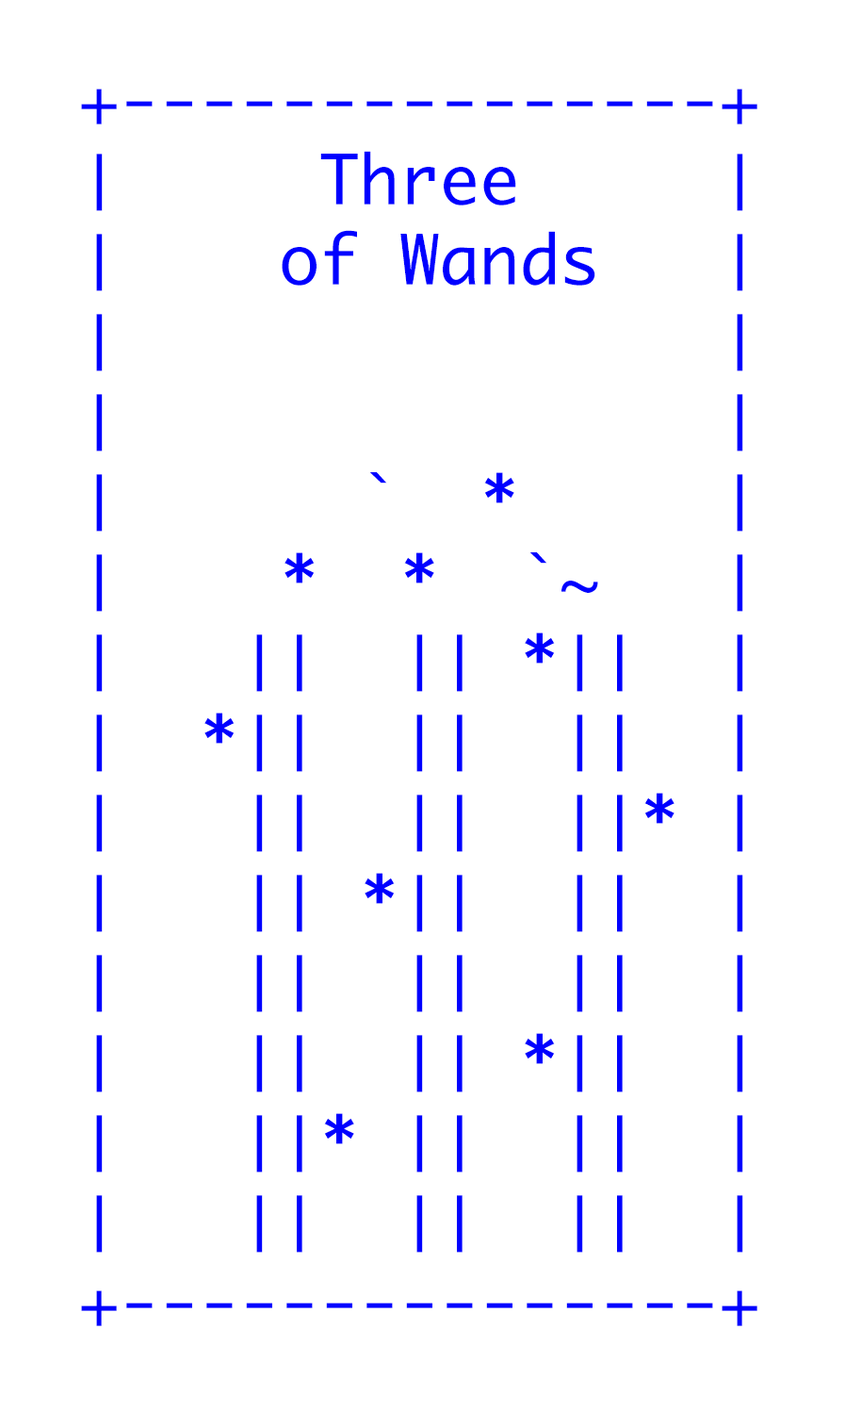
<style>
.page{position:relative;width:845px;height:1411px;background:#ffffff}
.page>*{position:absolute;margin:0}
.t1{font:66.7px "Monaco";color:#0000ff}
</style>
<div class="page">
<p class="t1" style="left:81px;top:89px;width:677px;height:1237px">+---------------+<br>│     Three     │<br>│    of Wands   │<br>│               │<br>│               │<br>│      `  *     │<br>│    *  *  `~   │<br>│   ││  ││ *││  │<br>│  *││  ││  ││  │<br>│   ││  ││  ││* │<br>│   ││ *││  ││  │<br>│   ││  ││  ││  │<br>│   ││  ││ *││  │<br>│   ││* ││  ││  │<br>│   ││  ││  ││  │<br>+---------------+</p>
</div>
